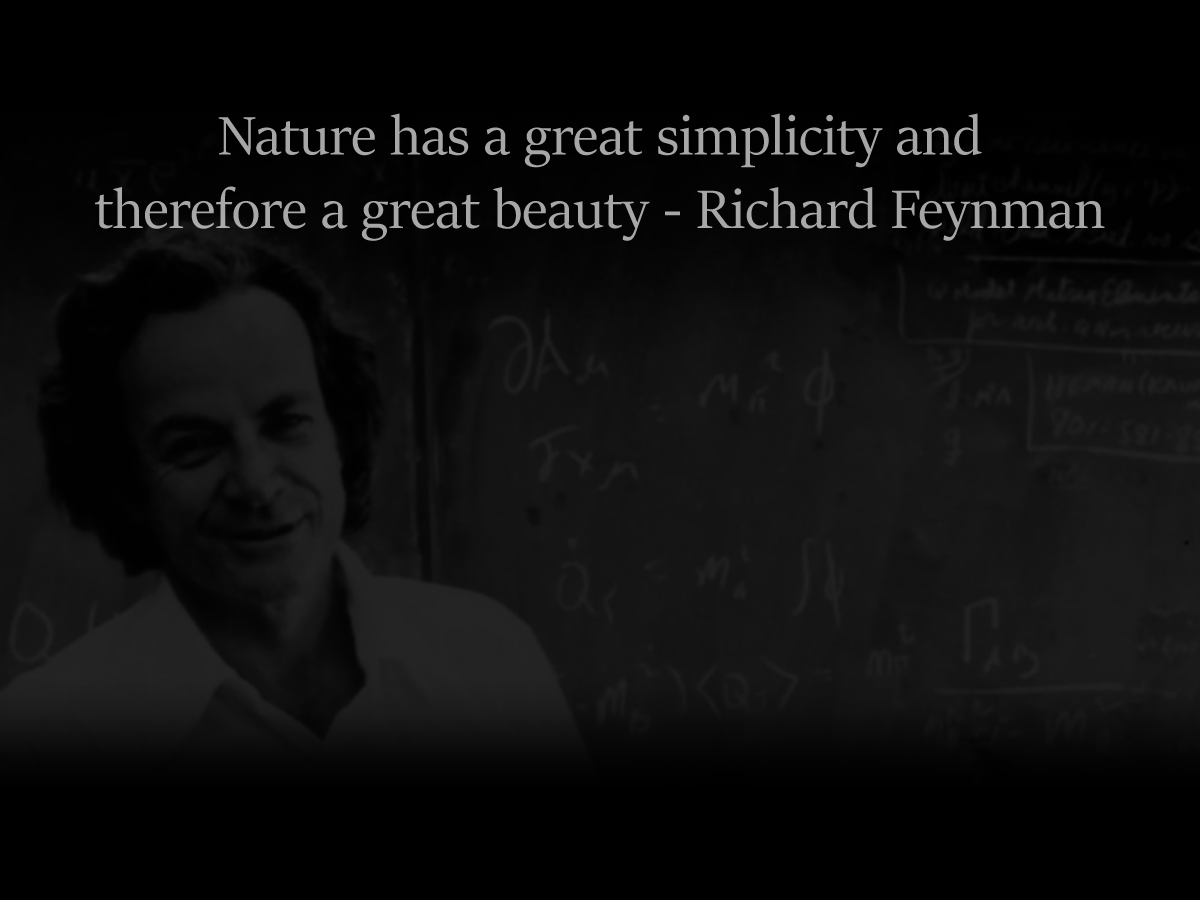
<style>
.page{position:relative;width:1200px;height:900px;background:#000000}
.page>*{position:absolute;margin:0}
.t1{font:61.1px "SitkaBanner";color:#a7a7a7}
</style>
<div class="page">
<p class="t1" style="left:95px;top:113px;width:1010px;height:128px;text-align:center">Nature has a great simplicity and <br>therefore a great beauty - Richard Feynman</p>
</div>
